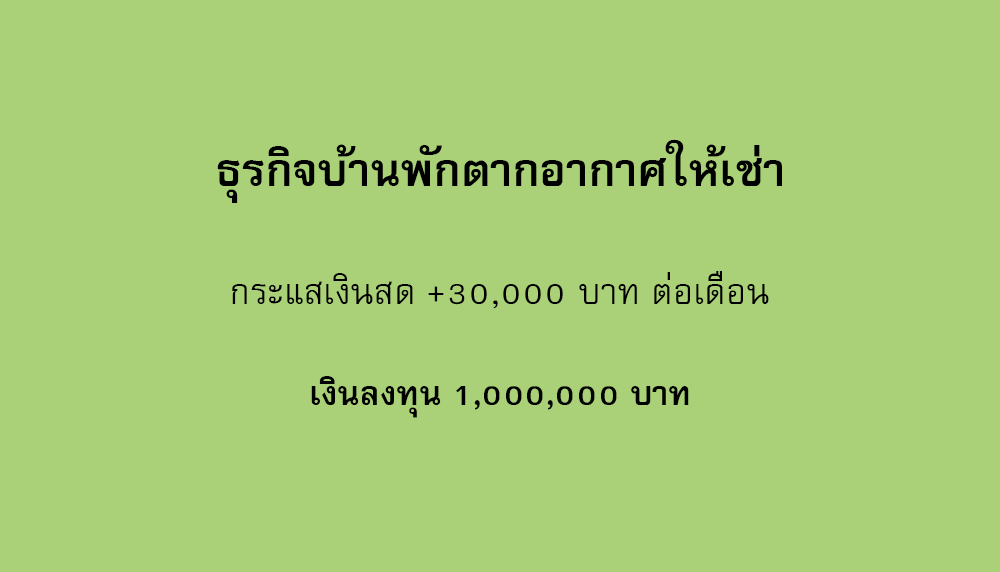
<style>
.page{position:relative;width:1000px;height:572px;background:#aad178}
.page>*{position:absolute;margin:0}
.t1{font:64px "FreesiaUPCBold";color:#000000}
.t2{font:50px "FreesiaUPC";color:#000000}
.t3{font:47px "FreesiaUPCBold";color:#000000}
</style>
<div class="page">
<p class="t1" style="left:217px;top:139px;width:565px;height:64px">ธุรกิจบ้านพักตากอากาศให้เช่า</p>
<p class="t2" style="left:232px;top:271px;width:537px;height:38px">กระแสเงินสด +30,000 บาท ต่อเดือน</p>
<p class="t3" style="left:311px;top:376px;width:378px;height:42px">เงินลงทุน 1,000,000 บาท</p>
</div>
